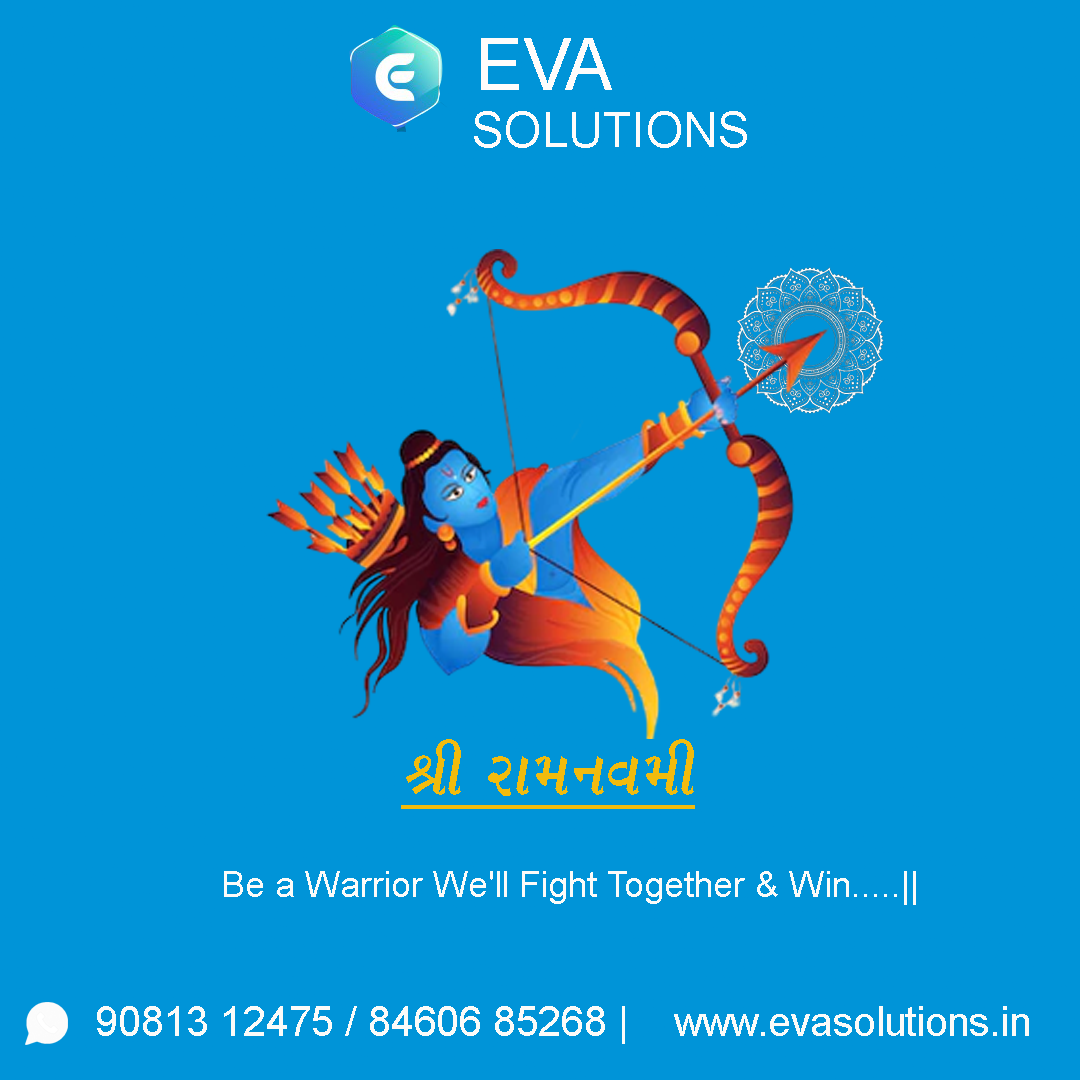
<style>
.page{position:relative;width:1080px;height:1080px;background:#0094d8}
.page>*{position:absolute;margin:0}
.t1{font:72px "ArialMT";color:#fefcfb}
.t2{font:48px "ArialMT";color:#fefcfb}
.t3{font:36px "ArialMT";color:#fbfbf9}
.t4{font:40.9px "ArialMT";color:#fbfbf9}
</style>
<div class="page">
<p class="t1" style="left:481px;top:38px;width:131px;height:52px">EVA</p>
<p class="t2" style="left:474px;top:111px;width:273px;height:37px">SOLUTIONS</p>
<p class="t3" style="left:224px;top:871px;width:692px;height:34px">Be a Warrior We'll Fight Together &amp; Win.....||</p>
<p class="t4" style="left:97px;top:1006px;width:932px;height:38px">90813 12475 / 84606 85268 |    www.evasolutions.in</p>
</div>
